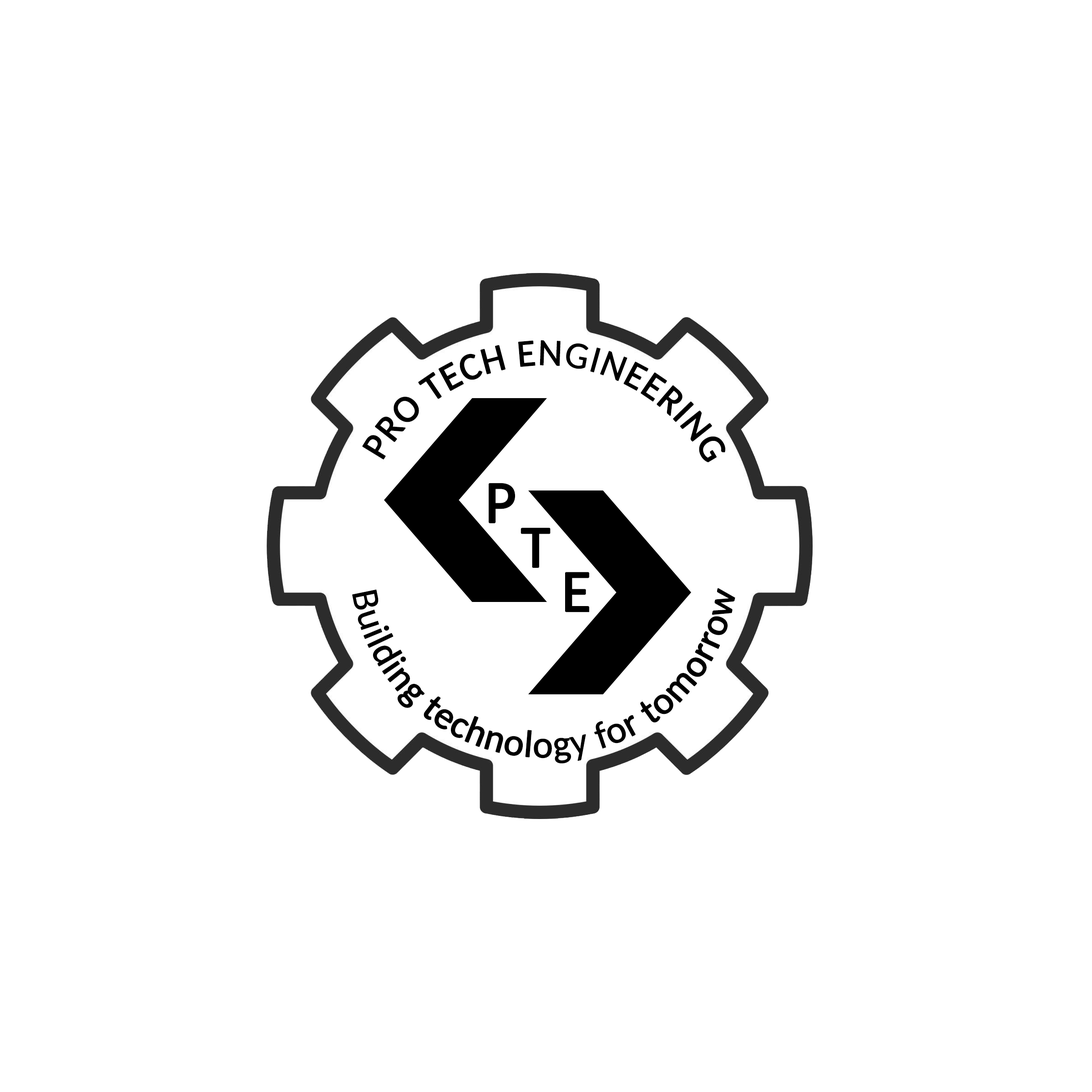
<style>
.page{position:relative;width:1092px;height:1092px;background:#ffffff}
.page>*{position:absolute;margin:0}
.t1{font:37.9px "Carlito";color:#000000;font-weight:bold}
.t2{font:59.8px "Carlito";color:#000000;font-weight:bold}
</style>
<div class="page">
<p class="t1" style="left:362px;top:340px;width:363px;height:122px;rotate:-33deg">PRO TECH ENGINEERING</p>
<p class="t2" style="left:489px;top:483px;width:26px;height:40px">P</p>
<p class="t2" style="left:521px;top:528px;width:30px;height:40px">T</p>
<p class="t2" style="left:565px;top:572px;width:24px;height:40px">E</p>
<p class="t1" style="left:352px;top:588px;width:383px;height:175px;rotate:31deg">Building technology for tomorrow</p>
</div>
